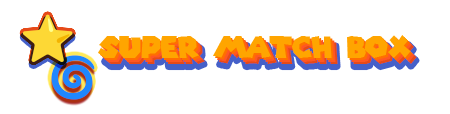
<style>
.page{position:relative;width:450px;height:114px;background:#ffffff}
.page>*{position:absolute;margin:0}
.t1{font:30px "SuperMarioGalaxy";color:#ffa500}
.t2{font:30px "SuperMarioGalaxy"}
</style>
<div class="page">
<p class="t1" style="left:98px;top:35px;width:313px;height:23px">super match box</p>
<p class="t1" style="left:100px;top:37px;width:313px;height:23px">super match box</p>
<p class="t2" style="left:102px;top:39px;width:313px;height:23px">super match box</p>
<p class="t2" style="left:104px;top:41px;width:313px;height:23px">super match box</p>
</div>
